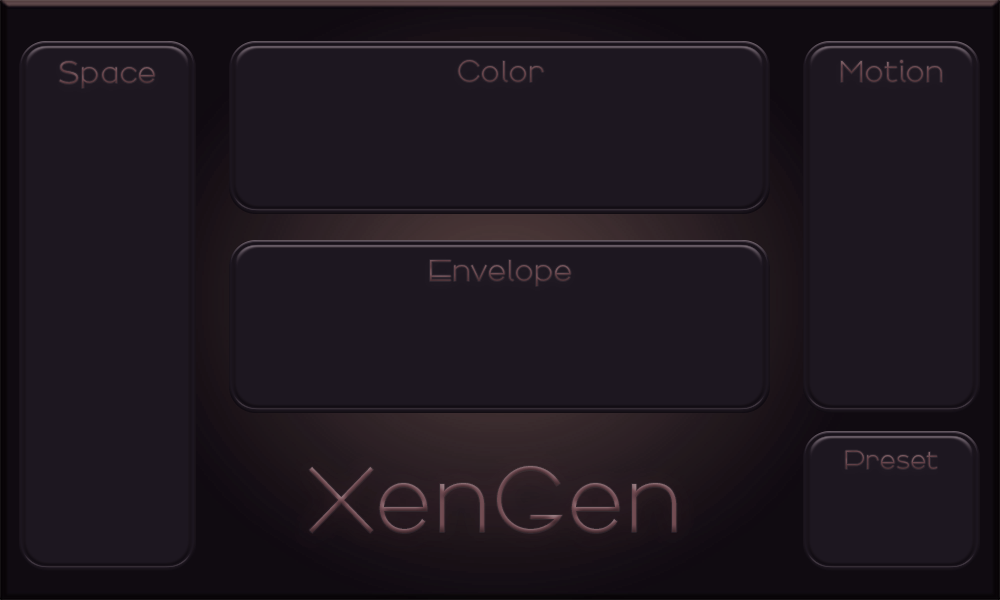
<style>
.page{position:relative;width:1000px;height:600px;background:#1d1720}
.page>*{position:absolute;margin:0}
.t1{font:32.6px "Arbotek-Light";color:#65444b}
.t2{font:44.8px "Arbotek-Light";color:#65444b}
.t3{font:32.6px "Arbotek-Light";color:#644249}
.t4{font:32.6px "Arbotek-Light";color:#66454c}
.t5{font:28px "Arbotek-Light";color:#624148}
.t6{font:99.6px "Arbotek-Light"}
</style>
<div class="page">
<p class="t1" style="left:59px;top:61px;width:96px;height:27px"><span class="t2">s</span>pace</p>
<p class="t3" style="left:458px;top:60px;width:86px;height:22px">Color</p>
<p class="t3" style="left:841px;top:60px;width:101px;height:22px">Motion</p>
<p class="t4" style="left:430px;top:260px;width:141px;height:26px">Envelope</p>
<p class="t5" style="left:845px;top:450px;width:92px;height:19px">Preset</p>
<p class="t6" style="left:309px;top:466px;width:368px;height:67px">XenGen</p>
</div>
